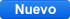
<style>
.page{position:relative;width:70px;height:19px}
.page>*{position:absolute;margin:0}
.t1{font:13.6px "Arial-BoldMT";color:#ffffff}
</style>
<div class="page">
<p class="t1" style="left:15px;top:4px;width:41px;height:10px">Nuevo</p>
</div>
